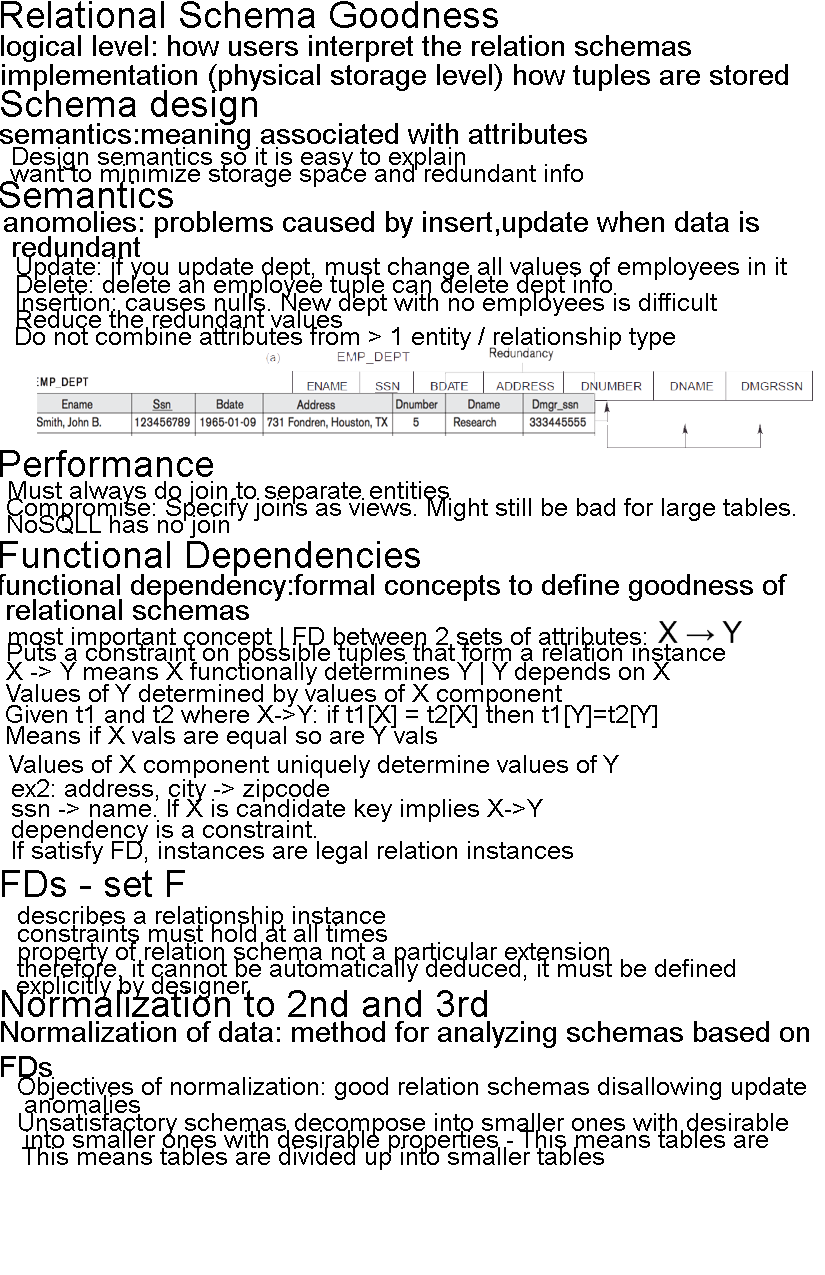
<style>
.page{position:relative;width:825px;height:1275px;background:#ffffff}
.page>*{position:absolute;margin:0}
.t1{font:37.5px "ArialMT";color:#000000}
.t2{font:29.2px "ArialMT";color:#000000}
.t3{font:25px "ArialMT";color:#000000}
.t4{font:29.2px/25px "ArialMT";color:#000000}
.t5{font:25px/20.9px "ArialMT";color:#000000}
</style>
<div class="page">
<p class="t1" style="left:1px;top:1px;width:497px;height:27px">Relational Schema Goodness</p>
<p class="t2" style="left:1px;top:35px;width:690px;height:27px">logical level: how users interpret the relation schemas</p>
<p class="t2" style="left:2px;top:64px;width:786px;height:27px">implementation (physical storage level) how tuples are stored</p>
<p class="t1" style="left:1px;top:90px;width:256px;height:35px">Schema design</p>
<p class="t2" style="left:0px;top:123px;width:587px;height:27px">semantics:meaning associated with attributes</p>
<p class="t3" style="left:13px;top:147px;width:452px;height:23px">Design semantics so it is easy to explain</p>
<p class="t3" style="left:10px;top:164px;width:573px;height:23px">want to minimize storage space and redundant info</p>
<p class="t1" style="left:0px;top:181px;width:173px;height:27px">Semantics</p>
<p class="t4" style="left:4px;top:211px;width:755px;height:46px">anomolies: problems caused by insert,update when data is <br> redundant</p>
<p class="t3" style="left:17px;top:257px;width:770px;height:23px">Update: if you update dept, must change all values of employees in it</p>
<p class="t3" style="left:17px;top:275px;width:595px;height:23px">Delete: delete an employee tuple can delete dept info</p>
<p class="t3" style="left:17px;top:293px;width:700px;height:23px">Insertion: causes nulls. New dept with no employees is difficult</p>
<p class="t3" style="left:17px;top:310px;width:325px;height:18px">Reduce the redundant values</p>
<p class="t3" style="left:16px;top:327px;width:659px;height:23px">Do not combine attributes from &gt; 1 entity / relationship type</p>
<p class="t1" style="left:0px;top:450px;width:213px;height:27px">Performance</p>
<p class="t3" style="left:9px;top:481px;width:440px;height:23px">Must always do join to separate entities</p>
<p class="t3" style="left:7px;top:498px;width:788px;height:23px">Compromise: Specify joins as views. Might still be bad for large tables.</p>
<p class="t3" style="left:8px;top:515px;width:221px;height:23px">NoSQLL has no join</p>
<p class="t1" style="left:0px;top:541px;width:420px;height:35px">Functional Dependencies</p>
<p class="t3" style="left:9px;top:627px;width:637px;height:23px">most important concept | FD between 2 sets of attributes:</p>
<p class="t3" style="left:8px;top:643px;width:717px;height:23px">Puts a constraint on possible tuples that form a relation instance</p>
<p class="t3" style="left:6px;top:662px;width:664px;height:23px">X -&gt; Y means X functionally determines Y | Y depends on X</p>
<p class="t3" style="left:6px;top:684px;width:556px;height:23px">Values of Y determined by values of X component</p>
<p class="t5" style="left:6px;top:705px;width:651px;height:44px">Given t1 and t2 where X-&gt;Y: if t1[X] = t2[X] then t1[Y]=t2[Y]<br>Means if X vals are equal so are Y vals</p>
<p class="t3" style="left:9px;top:755px;width:610px;height:23px">Values of X component uniquely determine values of Y</p>
<p class="t5" style="left:12px;top:779px;width:561px;height:85px">ex2: address, city -&gt; zipcode<br>ssn -&gt; name. If X is candidate key implies X-&gt;Y<br>dependency is a constraint.<br>If satisfy FD, instances are legal relation instances</p>
<p class="t1" style="left:2px;top:870px;width:183px;height:27px">FDs - set F</p>
<p class="t3" style="left:18px;top:906px;width:367px;height:23px">describes a relationship instance</p>
<p class="t3" style="left:18px;top:924px;width:369px;height:18px">constraints must hold at all times</p>
<p class="t3" style="left:19px;top:942px;width:590px;height:23px">property of relation schema not a particular extension</p>
<p class="t3" style="left:17px;top:959px;width:718px;height:23px">therefore, it cannot be automatically deduced, it must be defined</p>
<p class="t3" style="left:17px;top:976px;width:231px;height:23px">explicitly by designer</p>
<p class="t1" style="left:2px;top:990px;width:485px;height:27px">Normalization to 2nd and 3rd</p>
<p class="t2" style="left:1px;top:1021px;width:808px;height:56px">Normalization of data: method for analyzing schemas based on<br>FDs</p>
<p class="t3" style="left:18px;top:1077px;width:788px;height:23px">Objectives of normalization: good relation schemas disallowing update</p>
<p class="t3" style="left:25px;top:1095px;width:115px;height:18px">anomalies</p>
<p class="t3" style="left:19px;top:1113px;width:769px;height:23px">Unsatisfactory schemas decompose into smaller ones with desirable</p>
<p class="t3" style="left:26px;top:1130px;width:742px;height:23px">into smaller ones with desirable properties - This means tables are</p>
<p class="t3" style="left:22px;top:1147px;width:582px;height:23px">This means tables are divided up into smaller tables</p>
</div>
